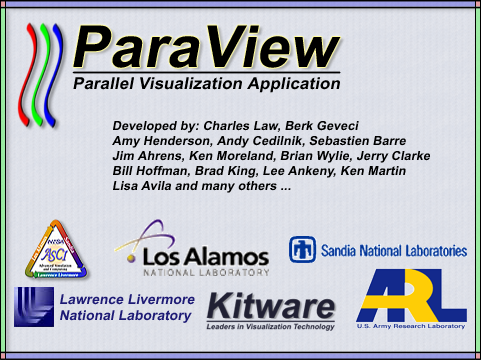
<style>
.page{position:relative;width:481px;height:360px}
.page>*{position:absolute;margin:0}
.t1{font:57.9px "Arial-BoldMT";letter-spacing:0.01em;color:#000000;font-style:italic}
.t2{font:16.4px "Arial-BoldMT";letter-spacing:0.01em;color:#000000;font-style:italic}
.t3{font:12.5px "Arial-BoldMT";letter-spacing:0.01em;color:#000000;font-style:italic}
.t4{font:12.5px/8.8px "Arial-BoldMT";letter-spacing:0.01em;color:#000000;font-style:italic}
.t5{font:13.7px "Arial-BoldMT";letter-spacing:0.01em;color:#1d1a75;font-style:italic}
</style>
<div class="page">
<p class="t1" style="left:73px;top:25px;width:268px;height:43px">ParaView</p>
<p class="t2" style="left:73px;top:77px;width:267px;height:16px">Parallel Visualization Application</p>
<p class="t3" style="left:112px;top:121px;width:318px;height:72px"><span class="t4">Developed by: C</span>harles Law, Berk Geveci<br>Amy Henderson, Andy Cedilnik, Sebastien Barre<br>Jim Ahrens, Ken Moreland, Brian Wylie, Jerry Clarke<br>Bill Hoffman, Brad King, Lee Ankeny, Ken Martin<br>Lisa Avila and many others ...</p>
<p class="t5" style="left:60px;top:294px;width:135px;height:29px">Lawrence Livermore <br>National Laboratory</p>
</div>
